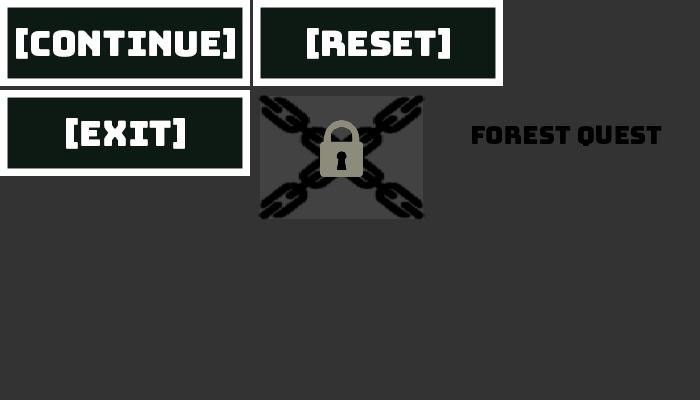
<style>
.page{position:relative;width:700px;height:400px;background:#333333}
.page>*{position:absolute;margin:0}
.t1{font:35px "Bungee-Regular";color:#ffffff}
.t2{font:25px "Bungee-Regular";color:#000000}
</style>
<div class="page">
<p class="t1" style="left:16px;top:28px;width:219px;height:31px">[Continue]</p>
<p class="t1" style="left:307px;top:28px;width:143px;height:31px">[Reset]</p>
<p class="t1" style="left:66px;top:118px;width:119px;height:31px">[Exit]</p>
<p class="t2" style="left:472px;top:125px;width:190px;height:21px">Forest quest</p>
</div>
